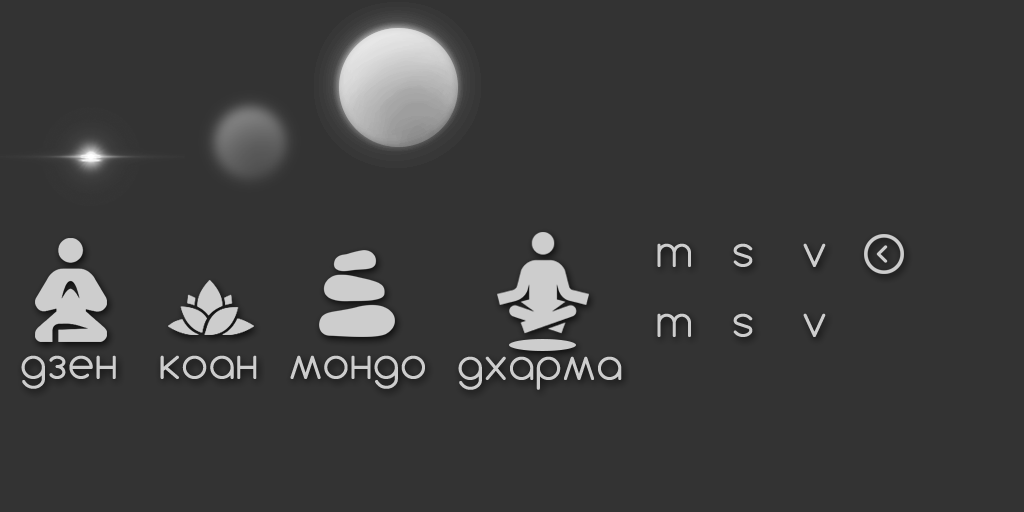
<style>
.page{position:relative;width:1024px;height:512px;background:#333333}
.page>*{position:absolute;margin:0}
.t1{font:41.7px "Comfortaa-Light";color:#cdcdcd;font-weight:bold}
</style>
<div class="page">
<p class="t1" style="left:657px;top:243px;width:34px;height:24px">m</p>
<p class="t1" style="left:733px;top:243px;width:20px;height:24px">s</p>
<p class="t1" style="left:803px;top:243px;width:23px;height:24px">v</p>
<p class="t1" style="left:657px;top:313px;width:34px;height:24px">m</p>
<p class="t1" style="left:733px;top:313px;width:20px;height:24px">s</p>
<p class="t1" style="left:803px;top:313px;width:23px;height:24px">v</p>
<p class="t1" style="left:21px;top:355px;width:95px;height:34px">дзен</p>
<p class="t1" style="left:160px;top:355px;width:97px;height:24px">коан</p>
<p class="t1" style="left:290px;top:355px;width:135px;height:34px">мондо</p>
<p class="t1" style="left:458px;top:356px;width:164px;height:34px">дхарма</p>
</div>
